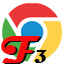
<style>
.page{position:relative;width:64px;height:64px;background:#ffffff}
.page>*{position:absolute;margin:0}
.t1{font:40px "Magneto-Bold";color:#f40c0c}
.t2{font:40px "Magneto-Bold"}
.t3{font:18.7px "Magneto-Bold";color:#080808}
</style>
<div class="page">
<p class="t1" style="left:1px;top:36px;width:39px;height:27px">F</p>
<p class="t2" style="left:3px;top:37px;width:39px;height:27px">F</p>
<p class="t3" style="left:34px;top:50px;width:13px;height:13px">3</p>
</div>
